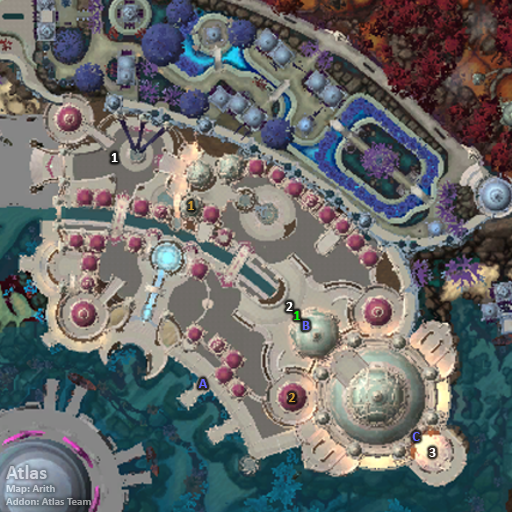
<style>
.page{position:relative;width:512px;height:512px}
.page>*{position:absolute;margin:0}
.t1{font:14px "Calibri-Bold";color:#ffffff}
.t2{font:14px "Calibri-Bold";color:#cc9933}
.t3{font:14px "Calibri-Bold";color:#00ff00}
.t4{font:14px "Calibri-Bold";color:#6666ff}
.t5{font:11px "Calibri-Bold";color:#c7cfd8}
.t6{font:20px "Calibri-Bold";color:#c7cfd8}
</style>
<div class="page">
<p class="t1" style="left:111px;top:153px;width:7px;height:9px">1</p>
<p class="t2" style="left:188px;top:201px;width:6px;height:9px">1</p>
<p class="t1" style="left:286px;top:302px;width:7px;height:9px">2</p>
<p class="t3" style="left:294px;top:311px;width:6px;height:9px">1</p>
<p class="t4" style="left:302px;top:321px;width:8px;height:9px">B</p>
<p class="t4" style="left:198px;top:379px;width:9px;height:9px">A</p>
<p class="t2" style="left:289px;top:393px;width:7px;height:9px">2</p>
<p class="t4" style="left:412px;top:432px;width:8px;height:9px">C</p>
<p class="t1" style="left:429px;top:448px;width:7px;height:9px">3</p>
<p class="t5" style="left:6px;top:465px;width:85px;height:40px"><span class="t6">Atlas<br></span>Map: Arith<br>Addon: Atlas Team</p>
</div>
